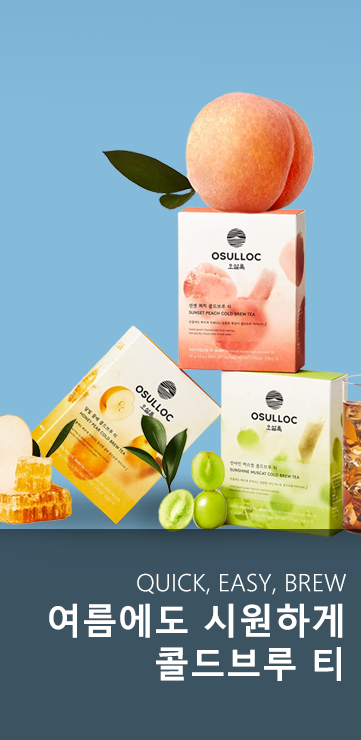
<style>
.page{position:relative;width:361px;height:740px;background:#84bada}
.page>*{position:absolute;margin:0}
.t1{font:24px "MalgunGothic-Semilight";color:#ffffff}
.t2{font:36px "MalgunGothicBold";color:#ffffff}
</style>
<div class="page">
<p class="t1" style="left:49px;top:573px;width:297px;height:108px;text-align:right">QUICK, EASY, BREW<br><span class="t2">여름에도 시원하게<br>콜드브루 티</span></p>
</div>
